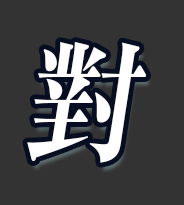
<style>
.page{position:relative;width:184px;height:205px;background:#333333}
.page>*{position:absolute;margin:0}
.t1{font:130px "RyuminPr6N-ExBold";letter-spacing:0.1em;color:#ffffff;font-style:italic;scale:0.88 1}
</style>
<div class="page">
<p class="t1" style="left:27px;top:42px;width:119px;height:121px">對</p>
</div>
